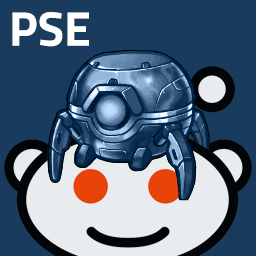
<style>
.page{position:relative;width:256px;height:256px;background:#193b5d}
.page>*{position:absolute;margin:0}
.t1{font:48.7px "TitilliumWeb-Bold";color:#ffffff}
</style>
<div class="page">
<p class="t1" style="left:12px;top:12px;width:77px;height:35px">PSE</p>
</div>
